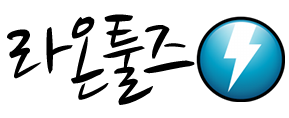
<style>
.page{position:relative;width:289px;height:118px;background:#ffffff}
.page>*{position:absolute;margin:0}
.t1{font:94px "NanumBrush";letter-spacing:-0.05em;color:#000000}
</style>
<div class="page">
<p class="t1" style="left:7px;top:14px;width:188px;height:91px">라온툴즈</p>
</div>
